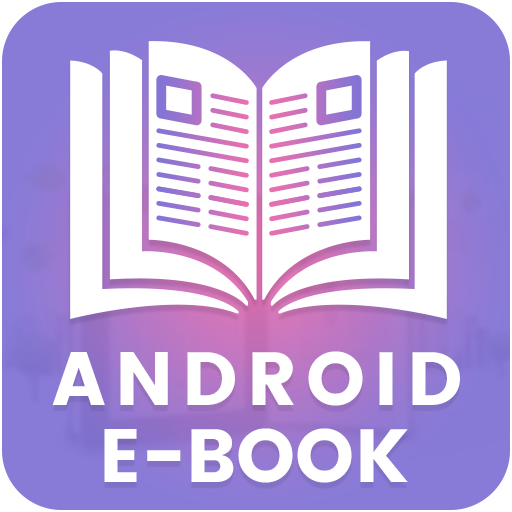
<style>
.page{position:relative;width:512px;height:512px;background:#ffffff}
.page>*{position:absolute;margin:0}
.t1{font:75.2px "Poppins";letter-spacing:0.12em;color:#ffffff;text-transform:uppercase}
.t2{font:75.2px "Poppins";color:#ffffff;text-transform:uppercase}
</style>
<div class="page">
<p class="t1" style="left:52px;top:351px;width:408px;height:55px">Android</p>
<p class="t2" style="left:104px;top:428px;width:304px;height:55px">E-Book</p>
</div>
